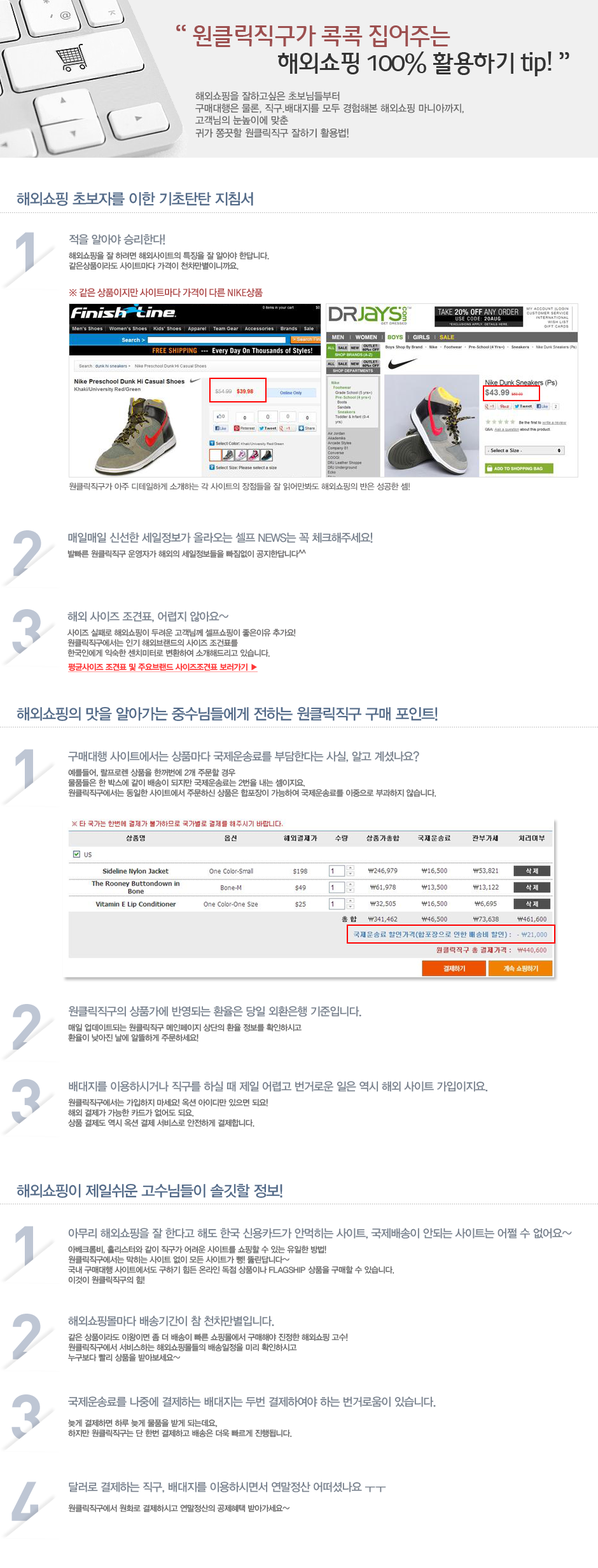
<style>
.page{position:relative;width:598px;height:1568px;background:#ffffff}
.page>*{position:absolute;margin:0}
.t1{font:22.9px "Daum_Regular";letter-spacing:-0.05em;color:#333333;scale:0.95 1}
.t2{font:22.9px "Daum_Regular";letter-spacing:-0.05em;color:#9d5050;scale:0.95 1}
.t3{font:10.2px "YDIYGO330";letter-spacing:-0.025em;color:#666666;scale:0.95 1}
.t4{font:15.3px "YDIYGO330";letter-spacing:-0.05em;color:#536a88;scale:0.97 1}
.t5{font:63.6px "DINPro-Bold";letter-spacing:-0.05em;color:#bec6d4}
.t6{font:8.3px/10.2px "YDIYGO330";letter-spacing:-0.05em;color:#666666;scale:0.97 1}
.t7{font:11.4px/12.7px "YDIYGO330";letter-spacing:-0.05em;color:#77808c;scale:0.97 1}
.t8{font:11.4px/15.3px "YDIYGO330";letter-spacing:-0.05em;color:#77808c;scale:0.97 1}
.t9{font:8.3px/15.3px "YDIYGO330";letter-spacing:-0.05em;color:#666666;scale:0.97 1}
.t10{font:9.5px "RixMGoPB";letter-spacing:-0.05em;color:#ae4a4a}
.t11{font:8.3px "YDIYGO330";letter-spacing:-0.05em;color:#6a6868}
.t12{font:8.3px/15.3px "YDIYGO330";letter-spacing:-0.05em;color:#6a6868;scale:0.97 1}
.t13{font:8.3px/10.2px "YDIYGO330";letter-spacing:-0.05em;color:#6a6868;scale:0.97 1}
.t14{font:8.3px "YDIYGO340";letter-spacing:-0.05em;color:#ff3333;text-decoration:underline;scale:0.97 1}
.t15{font:8.3px/10.2px "YDIYGO330";color:#666666;scale:0.97 1}
.t16{font:11.4px/10.2px "YDIYGO330";letter-spacing:-0.05em;color:#77808c;scale:0.97 1}
</style>
<div class="page">
<p class="t1" style="left:176px;top:25px;width:393px;height:51px"><span class="t2">“ 원클릭직구가 콕콕 집어주는 <br></span>                   해외쇼핑 100% 활용하기 tip! ”</p>
<p class="t3" style="left:195px;top:92px;width:269px;height:46px">해외쇼핑을 잘하고싶은 초보님들부터<br>구매대행은 물론, 직구.배대지를 모두 경험해본 해외쇼핑 마니아까지,<br>고객님의 눈높이에 맞춘 <br>귀가 쫑끗할 원클릭직구 잘하기 활용법!</p>
<p class="t4" style="left:17px;top:192px;width:236px;height:14px">해외쇼핑 초보자를 이한 기초탄탄 지침서</p>
<p class="t5" style="left:16px;top:232px;width:18px;height:46px">1</p>
<p class="t6" style="left:69px;top:234px;width:200px;height:36px"><span class="t7">적을 알아야 승리</span><span class="t8">한다!<br></span><span class="t9">해</span>외쇼핑을 잘 하려면 해외사이트의 특징을 잘 알아야 한답니다.<br>같은상품이라도 사이트마다 가격이 천차만별이니까요.</p>
<p class="t10" style="left:69px;top:288px;width:194px;height:10px">※ 같은 상품이지만 사이트마다 가격이 다른 NIKE상품</p>
<p class="t11" style="left:69px;top:483px;width:340px;height:7px">원클릭직구가 아주 디테일하게 소개하는 각 사이트의 장점들을 잘 읽어만봐도 해외쇼핑의 반은 성공한 셈!</p>
<p class="t5" style="left:13px;top:530px;width:28px;height:46px">2</p>
<p class="t12" style="left:67px;top:532px;width:306px;height:26px"><span class="t7">매일매일 신선한 세일정보가 올라오는 셀프 NEWS는</span><span class="t8"> 꼭 체크해주세요!<br></span>발빠른 원클릭직구 운영자가 해외의 세일정보들을 빠짐없이 공지한답니다^^</p>
<p class="t5" style="left:12px;top:609px;width:29px;height:47px">3</p>
<p class="t13" style="left:67px;top:611px;width:229px;height:46px"><span class="t7">해외 사이즈 조견표, 어</span><span class="t8">렵지 않아요~<br></span><span class="t12">사이즈 실패로 해외쇼핑이 두려운 고객님께</span> 셀프쇼핑이 좋은이유 추가요!<br>원클릭직구에서는 인기 해외브랜드의 사이즈 조건표를 <br>한국인에게 익숙한 센치미터로 변환하여 소개해드리고 있습니다.</p>
<p class="t14" style="left:68px;top:663px;width:190px;height:9px">평균사이즈 조견표 및 주요브랜드 사이즈조견표 보러가기 ▶</p>
<p class="t4" style="left:17px;top:706px;width:420px;height:15px">해외쇼핑의 맛을 알아가는 중수님들에게 전하는 원클릭직구 구매 포인트!</p>
<p class="t5" style="left:15px;top:749px;width:18px;height:46px">1</p>
<p class="t6" style="left:68px;top:751px;width:368px;height:46px"><span class="t7">구매대행 사이트에서는 상품마다 국제운송료를 부담한다는 사실, 알고 계셨나요?<br></span><span class="t9">예를들어, 랄프로렌 상품을 한꺼번에 2개 주문할 경우 <br></span>물품들은 한 박스에 같이 배송이 되지만 국제운송료는 2번을 내는 셈이지요.<br>원클릭직구에서는 동일한 사이트에서 주문하신 상품은 합포장이 가능하여 국제운송료를 이중으로 부과하지 않습니다.</p>
<p class="t5" style="left:13px;top:1004px;width:28px;height:46px">2</p>
<p class="t9" style="left:68px;top:1006px;width:293px;height:36px"><span class="t7">원클릭직구의 상품가에 반영되는 환율은 당일 외환은행 기준입니다.<br></span>매일 업데이트되는 원클릭직구 메인페이지 상단의 환율 정보를 확인하시고<br><span class="t6">환율이 낮아진 날에 알뜰하게 주문하세요!</span></p>
<p class="t5" style="left:11px;top:1079px;width:30px;height:46px">3</p>
<p class="t6" style="left:68px;top:1081px;width:420px;height:46px"><span class="t7">배대지를 이용하시거나 직구를 하실 때 제일 어렵고 번거로운 일은 역시 해외 사이트 가입이지요.<br></span><span class="t9">원클릭직구에</span>서는 가입하지 마세요! 옥션 아이디만 있으면 되요!<br>해외 결제가 가능한 카드가 없어도 되요.<br>상품 결제도 역시 옥션 결제 서비스로 안전하게 결제합니다.</p>
<p class="t4" style="left:17px;top:1183px;width:265px;height:15px">해외쇼핑이 제일쉬운 고수님들이 솔깃할 정보!</p>
<p class="t5" style="left:15px;top:1226px;width:18px;height:46px">1</p>
<p class="t6" style="left:68px;top:1228px;width:504px;height:56px"><span class="t7">아무리 해외쇼핑을 잘 한다고 해도 한국 신용카드가 안먹히는 사이트, 국제배송이 안되는 사이트는 어쩔 수 없어요~<br></span><span class="t9">아베크롬비, 홀리스터와 같이 직구가 어려운 사이트를 쇼핑할 수 있는 유일한 방법!<br></span>원클릭직구에서는 막히는 사이트 없이 모든 사이트가 뻥! 뚫린답니다~<br>국내 구매대행 사이트에서도 구하기 힘든 온라인 독점 상품이나 <span class="t15">FLAGSHIP </span>상품을 구매할 수 있습니다.<br>이것이 원클릭직구의 힘!</p>
<p class="t5" style="left:13px;top:1314px;width:28px;height:45px">2</p>
<p class="t6" style="left:68px;top:1316px;width:280px;height:46px"><span class="t7">해외쇼핑몰마다 배송기간이 참 천차만별입니다.<br></span><span class="t9">같은 상품이라도 이왕이면 좀 더 배송이 빠른 쇼핑몰에서 구매해야 진정한 해외쇼핑 고수!<br></span>원클릭직구에서 서비스하는 해외쇼핑몰들의 배송일정을 미리 확인하시고 <br>누구보다 빨리 상품을 받아보세요~</p>
<p class="t5" style="left:11px;top:1394px;width:30px;height:47px">3</p>
<p class="t6" style="left:68px;top:1396px;width:368px;height:42px"><span class="t7">국제운송료를 나중에 결제하는 배대지는 두번 결제하여야 하는 번거로움이 있습니다.<br></span><br>늦게 결제하면 하루 늦게 물품을 받게 되는데요,<br>하지만 원클릭직구는 단 한번 결제하고 배송은 더욱 빠르게 진행됩니다.</p>
<p class="t5" style="left:11px;top:1482px;width:32px;height:45px">4</p>
<p class="t16" style="left:68px;top:1482px;width:318px;height:31px">달러로 결제하는 직구, 배대지를 이용하시면서 연말정산 어떠셨나요 ㅜㅜ<br><br><span class="t6">원클릭직구에서 원화로 결제하시고 연말정산의 공제혜택 받아가세요~</span></p>
</div>
